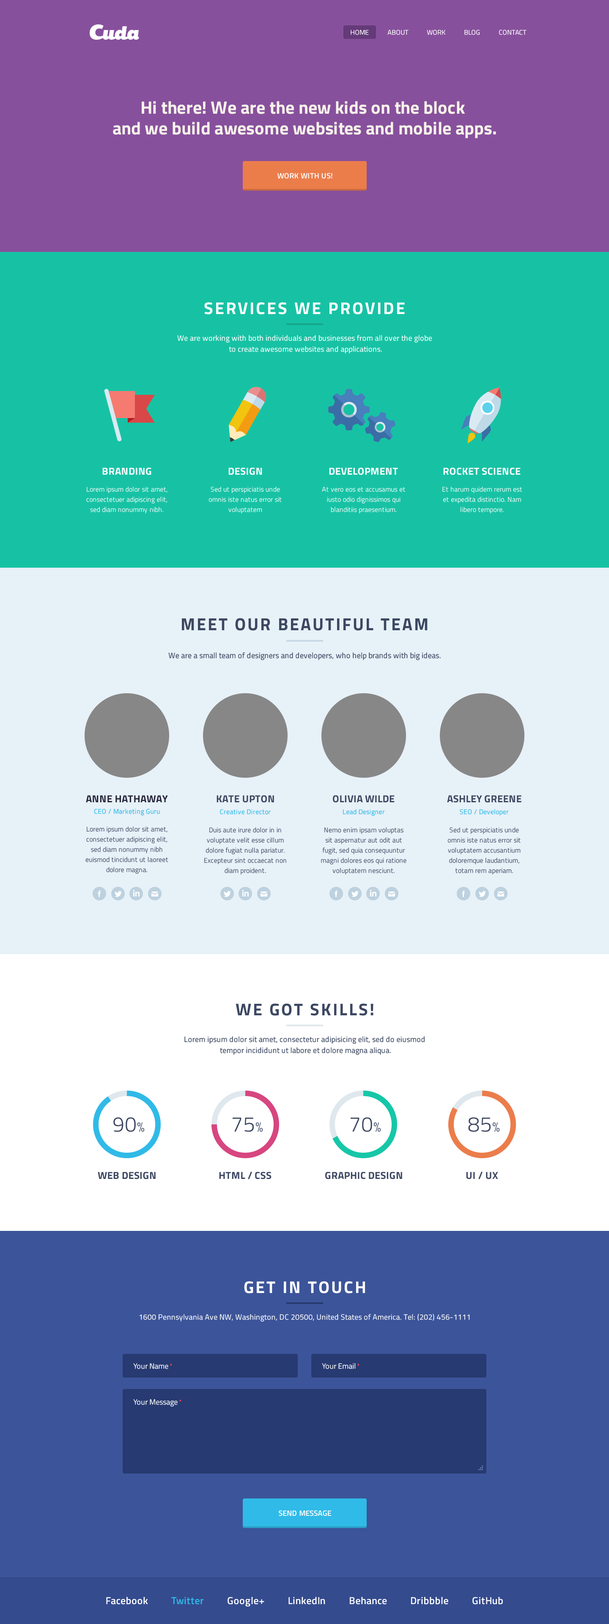
<style>
.page{position:relative;width:609px;height:1624px}
.page>*{position:absolute;margin:0}
.t1{font:6.8px "TitilliumWeb-Regular";color:#ffffff;text-transform:uppercase}
.t2{font:17.8px/20.6px "TitilliumWeb-Bold";color:#f7f3ea}
.t3{font:7.6px "TitilliumWeb-SemiBold";letter-spacing:0.02em;color:#ffffff}
.t4{font:16.9px "TitilliumWeb-Bold";letter-spacing:0.1em;color:#ffffff}
.t5{font:7.6px/11px "TitilliumWeb-Regular";letter-spacing:0.02em;color:#ffffff}
.t6{font:10.1px "TitilliumWeb-Bold";letter-spacing:0.02em;color:#ffffff;text-transform:uppercase}
.t7{font:6.8px/10.1px "TitilliumWeb-Light";letter-spacing:0.02em;color:#ffffff}
.t8{font:17.5px "TitilliumWeb-Bold";letter-spacing:0.1em;color:#3c4761;scale:0.97 1}
.t9{font:7.9px "TitilliumWeb-Regular";letter-spacing:0.02em;color:#3c4761;scale:0.97 1}
.t10{font:10.1px "TitilliumWeb-Bold";letter-spacing:0.02em;color:#27283d;text-transform:uppercase}
.t11{font:10.1px "TitilliumWeb-Bold";letter-spacing:0.02em;color:#3c4761;text-transform:uppercase}
.t12{font:6.8px "TitilliumWeb-Regular";letter-spacing:0.02em;color:#30bae7}
.t13{font:6.8px/10.1px "TitilliumWeb-Light";letter-spacing:0.02em;color:#3c4761}
.t14{font:16.9px "TitilliumWeb-Bold";letter-spacing:0.1em;color:#3c4761}
.t15{font:7.6px/11px "TitilliumWeb-Regular";letter-spacing:0.02em;color:#3c4761}
.t16{font:21.1px "TitilliumWeb-Light";letter-spacing:0.02em;color:#3c4761;text-transform:uppercase}
.t17{font:13.5px "TitilliumWeb-Light";letter-spacing:0.02em;color:#3c4761;text-transform:uppercase}
.t18{font:7.6px "TitilliumWeb-Regular";letter-spacing:0.02em;color:#ffffff}
.t19{font:7.6px "TitilliumWeb-Regular";color:#ffffff}
.t20{font:6.8px "ArialMT";color:#ff4444}
.t21{font:10.1px "TitilliumWeb-SemiBold";letter-spacing:0.02em;color:#ffffff}
.t22{font:10.1px "TitilliumWeb-SemiBold";letter-spacing:0.02em;color:#30bae7}
</style>
<div class="page">
<p class="t1" style="left:350px;top:30px;width:176px;height:5px">Home           About           WORK           Blog           Contact</p>
<p class="t2" style="left:113px;top:101px;width:383px;height:37px;text-align:center">Hi there! We are the new kids on the block <br>and we build awesome websites and mobile apps.</p>
<p class="t3" style="left:277px;top:173px;width:55px;height:6px">WORK WITH US!</p>
<p class="t4" style="left:204px;top:302px;width:201px;height:13px">SERVICES WE PROVIDE</p>
<p class="t5" style="left:177px;top:335px;width:255px;height:19px;text-align:center">We are working with both individuals and businesses from all over the globe <br>to create awesome websites and applications.</p>
<p class="t6" style="left:102px;top:468px;width:49px;height:7px">Branding</p>
<p class="t6" style="left:228px;top:468px;width:34px;height:7px">Design</p>
<p class="t6" style="left:329px;top:468px;width:69px;height:7px">Development</p>
<p class="t6" style="left:443px;top:468px;width:77px;height:7px">ROCKET SCIENCE</p>
<p class="t7" style="left:86px;top:487px;width:81px;height:27px;text-align:center">Lorem ipsum dolor sit amet, <br>consectetuer adipiscing elit, sed diam nonummy nibh.</p>
<p class="t7" style="left:208px;top:487px;width:74px;height:27px;text-align:center">Sed ut perspiciatis unde omnis iste natus error sit voluptatem</p>
<p class="t7" style="left:322px;top:487px;width:83px;height:27px;text-align:center">At vero eos et accusamus et iusto odio dignissimos qui blanditiis praesentium.</p>
<p class="t7" style="left:442px;top:487px;width:80px;height:27px;text-align:center">Et harum quidem rerum est et expedita distinctio. Nam libero tempore.</p>
<p class="t8" style="left:182px;top:618px;width:245px;height:13px">MEET OUR BEAUTIFUL TEAM</p>
<p class="t9" style="left:168px;top:652px;width:273px;height:8px">We are a small team of designers and developers, who help brands with big ideas.</p>
<p class="t10" style="left:86px;top:795px;width:82px;height:7px">ANNE HATHAWAY</p>
<p class="t11" style="left:216px;top:795px;width:58px;height:8px">Kate Upton</p>
<p class="t11" style="left:333px;top:795px;width:61px;height:8px">Olivia Wilde</p>
<p class="t11" style="left:447px;top:795px;width:74px;height:8px">Ashley Greene</p>
<p class="t12" style="left:94px;top:809px;width:66px;height:6px">CEO / Marketing Guru</p>
<p class="t12" style="left:220px;top:809px;width:51px;height:6px">Creative Director</p>
<p class="t12" style="left:343px;top:809px;width:42px;height:7px">Lead Designer</p>
<p class="t12" style="left:460px;top:809px;width:49px;height:7px">SEO / Developer</p>
<p class="t13" style="left:85px;top:826px;width:83px;height:48px;text-align:center">Lorem ipsum dolor sit amet, <br>consectetuer adipiscing elit, sed diam nonummy nibh euismod tincidunt ut laoreet dolore magna.</p>
<p class="t13" style="left:204px;top:827px;width:82px;height:48px;text-align:center">Duis aute irure dolor in in voluptate velit esse cillum dolore fugiat nulla pariatur. Excepteur sint occaecat non diam proident.</p>
<p class="t13" style="left:321px;top:827px;width:85px;height:48px;text-align:center">Nemo enim ipsam voluptas sit aspernatur aut odit aut fugit, sed quia consequuntur magni dolores eos qui ratione voluptatem nesciunt.</p>
<p class="t13" style="left:447px;top:827px;width:73px;height:48px;text-align:center">Sed ut perspiciatis unde omnis iste natus error sit voluptatem accusantium doloremque laudantium, totam rem aperiam.</p>
<p class="t14" style="left:235px;top:1004px;width:138px;height:12px">WE GOT SKILLS!</p>
<p class="t15" style="left:184px;top:1036px;width:240px;height:19px;text-align:center">Lorem ipsum dolor sit amet, consectetur adipisicing elit, sed do eiusmod <br>tempor incididunt ut labore et dolore magna aliqua.</p>
<p class="t16" style="left:113px;top:1117px;width:32px;height:15px">90<span class="t17">%</span></p>
<p class="t16" style="left:233px;top:1118px;width:30px;height:14px">75<span class="t17">%</span></p>
<p class="t16" style="left:350px;top:1117px;width:31px;height:15px">70<span class="t17">%</span></p>
<p class="t16" style="left:468px;top:1117px;width:32px;height:15px">85<span class="t17">%</span></p>
<p class="t11" style="left:98px;top:1172px;width:58px;height:7px">Web Design</p>
<p class="t11" style="left:219px;top:1171px;width:52px;height:8px">HTML / CSS</p>
<p class="t11" style="left:325px;top:1172px;width:77px;height:7px">GRAPHIC DESIGN</p>
<p class="t11" style="left:466px;top:1171px;width:32px;height:8px">UI / UX</p>
<p class="t4" style="left:244px;top:1281px;width:121px;height:13px">GET IN TOUCH</p>
<p class="t18" style="left:139px;top:1314px;width:331px;height:8px">1600 Pennsylvania Ave NW, Washington, DC 20500, United States of America. Tel: (202) 456-1111</p>
<p class="t19" style="left:133px;top:1363px;width:39px;height:6px">Your Name <span class="t20">*</span></p>
<p class="t19" style="left:322px;top:1363px;width:37px;height:6px">Your Email <span class="t20">*</span></p>
<p class="t19" style="left:133px;top:1399px;width:48px;height:8px">Your Message <span class="t20">*</span></p>
<p class="t3" style="left:279px;top:1510px;width:52px;height:6px">SEND MESSAGE</p>
<p class="t21" style="left:106px;top:1597px;width:397px;height:10px">Facebook          <span class="t22">Twitter</span>          Google+          LinkedIn          Behance          Dribbble          GitHub</p>
</div>
